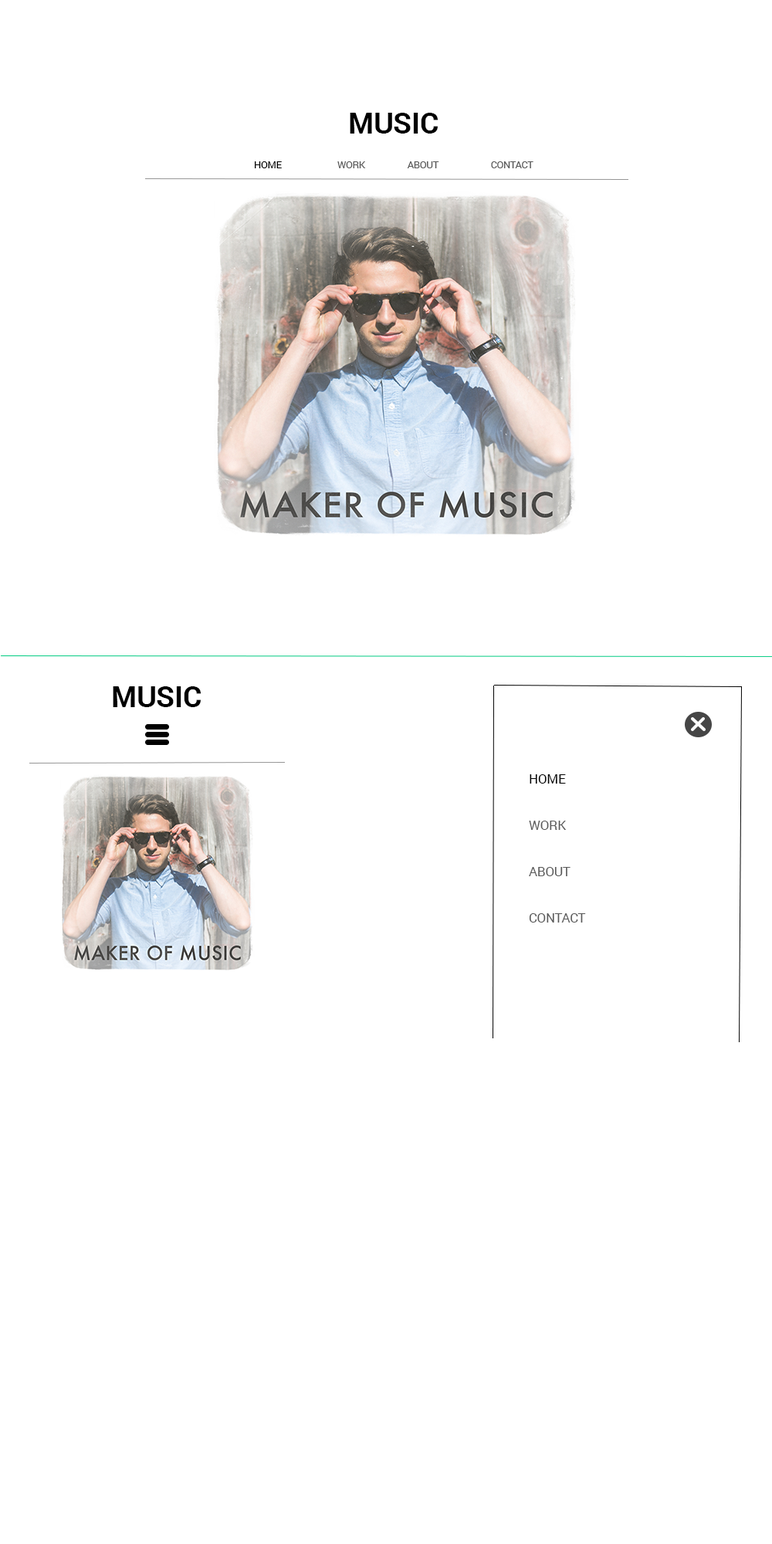
<style>
.page{position:relative;width:772px;height:1544px;background:#ffffff}
.page>*{position:absolute;margin:0}
.t1{font:29px "Roboto-Bold";color:#000000}
.t2{font:9.7px "Roboto-Regular";color:#5a5a5a}
.t3{font:9.7px "Roboto-Regular";color:#000000}
.t4{font:12.9px "Roboto-Regular";color:#5a5a5a}
.t5{font:12.9px "Roboto-Regular";color:#000000}
</style>
<div class="page">
<p class="t1" style="left:350px;top:113px;width:88px;height:21px">MUSIC</p>
<p class="t2" style="left:255px;top:161px;width:279px;height:7px"><span class="t3">HOME </span>  WORK        ABOUT        CONTACT</p>
<p class="t1" style="left:113px;top:686px;width:88px;height:21px">MUSIC</p>
<p class="t4" style="left:529px;top:774px;width:57px;height:149px"><span class="t5">HOME<br></span><br><br>WORK<br><br><br>ABOUT<br><br><br>CONTACT</p>
</div>
